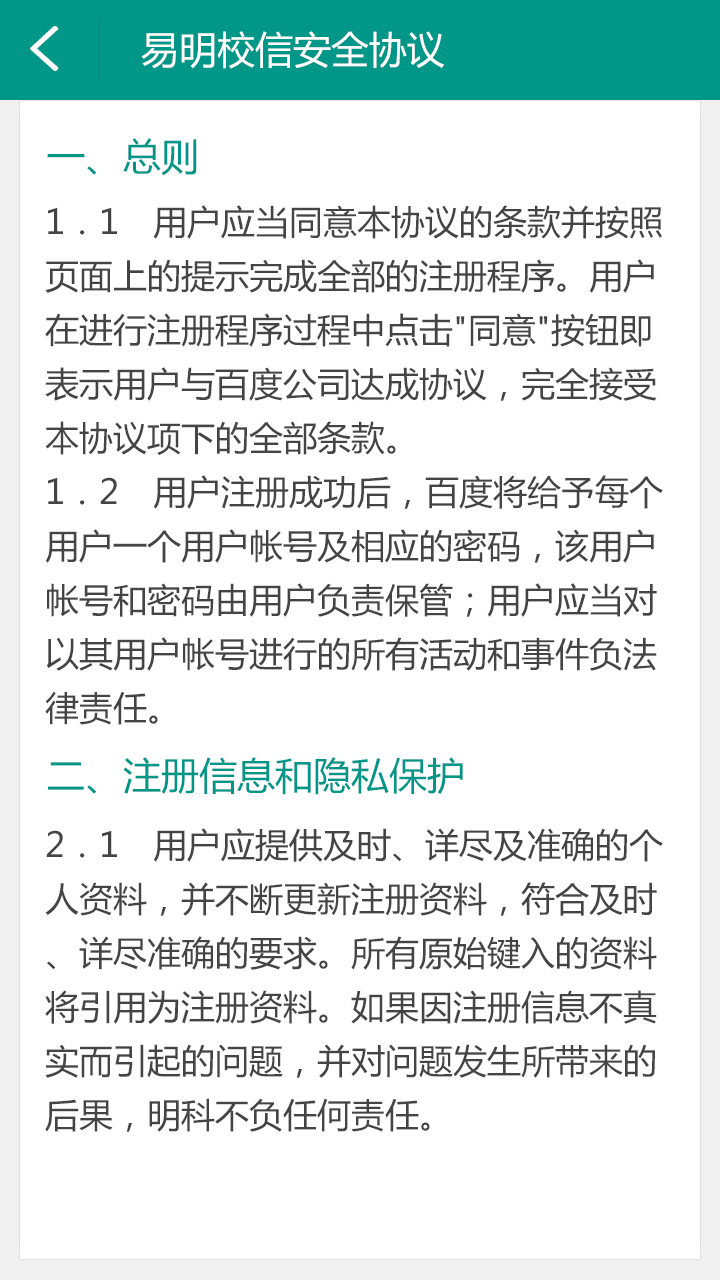
<style>
.page{position:relative;width:720px;height:1280px;background:#ffffff}
.page>*{position:absolute;margin:0}
.t1{font:62px "SimHei";color:#ffffff;font-weight:bold}
.t2{font:38px "MicrosoftYaHei";color:#ffffff}
.t3{font:38px "MicrosoftYaHei";color:#009788}
.t4{font:34px/54px "MicrosoftYaHei";color:#444444}
</style>
<div class="page">
<p class="t1" style="left:30px;top:26px;width:29px;height:45px">&lt;</p>
<p class="t2" style="left:141px;top:31px;width:304px;height:38px">易明校信安全协议</p>
<p class="t3" style="left:47px;top:138px;width:150px;height:38px">一、总则</p>
<p class="t4" style="left:45px;top:205px;width:618px;height:520px">1．1　用户应当同意本协议的条款并按照页面上的提示完成全部的注册程序。用户在进行注册程序过程中点击"同意"按钮即表示用户与百度公司达成协议，完全接受本协议项下的全部条款。<br>1．2　用户注册成功后，百度将给予每个用户一个用户帐号及相应的密码，该用户帐号和密码由用户负责保管；用户应当对以其用户帐号进行的所有活动和事件负法律责任。</p>
<p class="t3" style="left:48px;top:757px;width:415px;height:38px">二、注册信息和隐私保护</p>
<p class="t4" style="left:45px;top:828px;width:618px;height:304px">2．1　用户应提供及时、详尽及准确的个人资料，并不断更新注册资料，符合及时、详尽准确的要求。所有原始键入的资料将引用为注册资料。如果因注册信息不真实而引起的问题，并对问题发生所带来的后果，明科不负任何责任。</p>
</div>
